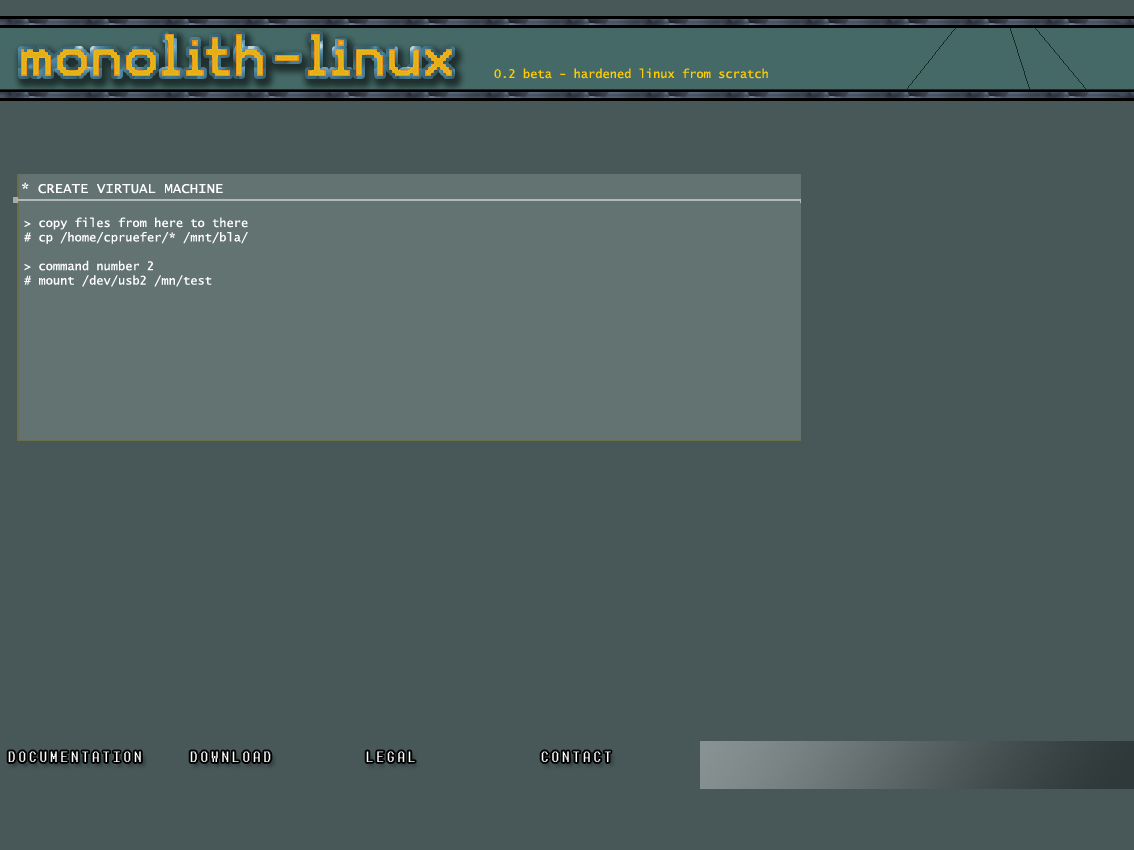
<style>
.page{position:relative;width:1134px;height:850px;background:#485859}
.page>*{position:absolute;margin:0}
.t1{font:12px "LucidaConsole";color:#ffcc00}
.t2{font:14px "LucidaConsole";color:#ffffff}
.t3{font:12px "LucidaConsole";color:#ffffff}
.t4{font:14px "Terminal";color:#ffffff}
</style>
<div class="page">
<p class="t1" style="left:494px;top:68px;width:274px;height:11px">0.2 beta - hardened linux from scratch</p>
<p class="t2" style="left:22px;top:182px;width:201px;height:12px">* CREATE VIRTUAL MACHINE</p>
<p class="t3" style="left:24px;top:217px;width:224px;height:70px">&gt; copy files from here to there<br># cp /home/cpruefer/* /mnt/bla/<br><br>&gt; command number 2<br># mount /dev/usb2 /mn/test</p>
<p class="t4" style="left:8px;top:751px;width:133px;height:11px">DOCUMENTATION</p>
<p class="t4" style="left:190px;top:751px;width:81px;height:11px">DOWNLOAD</p>
<p class="t4" style="left:366px;top:751px;width:49px;height:11px">LEGAL</p>
<p class="t4" style="left:541px;top:751px;width:70px;height:11px">CONTACT</p>
</div>
